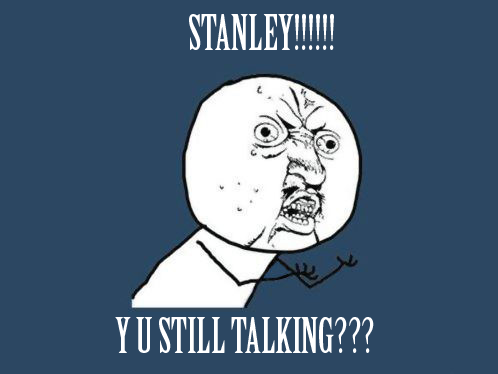
<style>
.page{position:relative;width:498px;height:374px;background:#2c4762}
.page>*{position:absolute;margin:0}
.t1{font:48px "BirchStd";color:#ffffff}
</style>
<div class="page">
<p class="t1" style="left:189px;top:14px;width:145px;height:36px">STANLEY!!!!!!</p>
<p class="t1" style="left:115px;top:317px;width:259px;height:36px">Y U STILL TALKING???</p>
</div>
